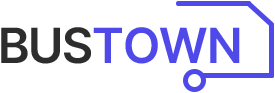
<style>
.page{position:relative;width:275px;height:93px;background:#ffffff}
.page>*{position:absolute;margin:0}
.t1{font:50px "Pretendard-SemiBold";letter-spacing:-0.02em;color:#4f49e9}
.t2{font:50px "Pretendard-SemiBold";letter-spacing:-0.02em;color:#2d2d2d}
</style>
<div class="page">
<p class="t1" style="left:1px;top:27px;width:239px;height:37px"><span class="t2">BUS</span>TOWN</p>
</div>
